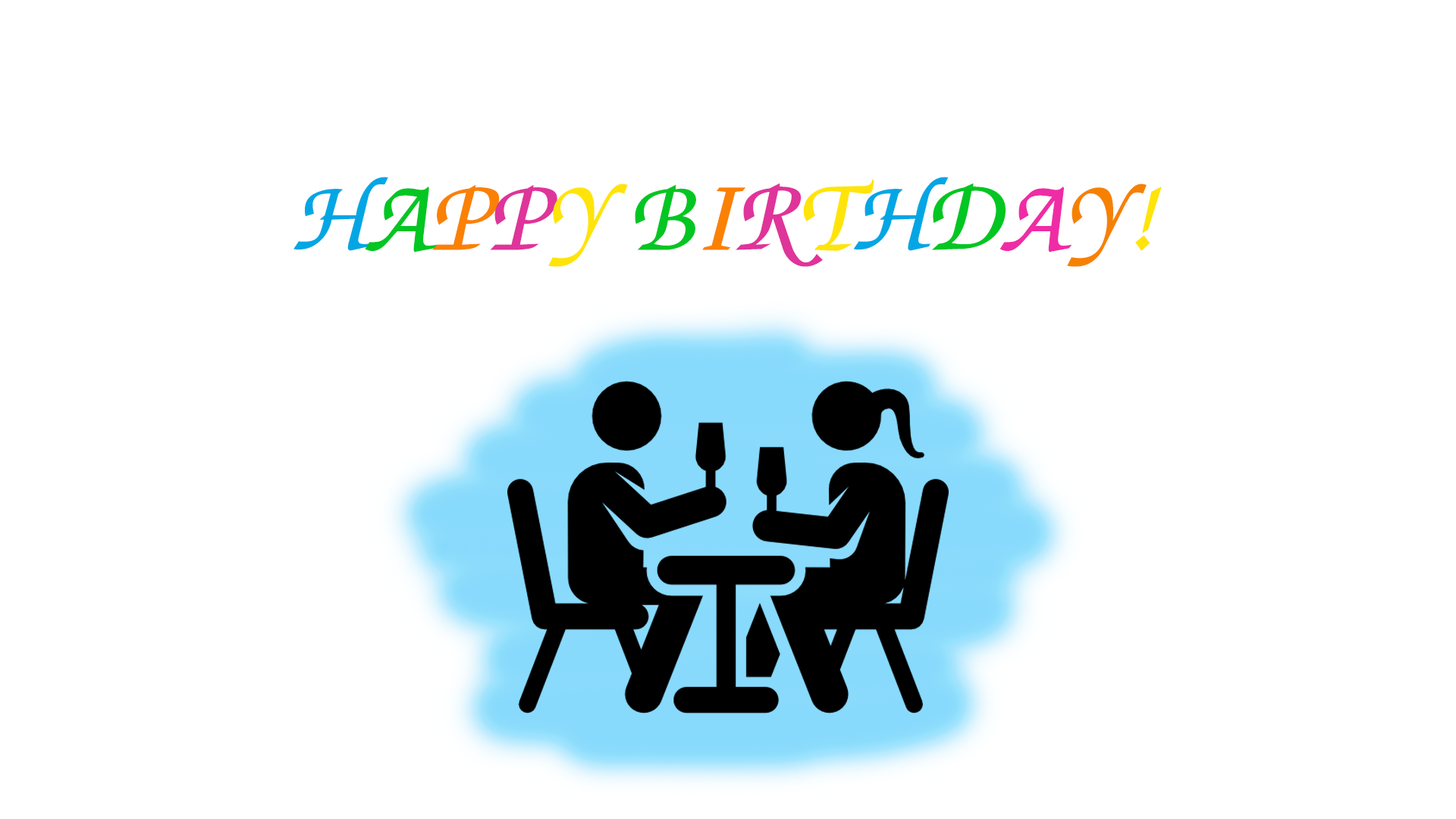
<style>
.page{position:relative;width:1456px;height:819px;background:#ffffff}
.page>*{position:absolute;margin:0}
.t1{font:107.6px "ThaHuongH11";color:#03a6e4}
.t2{font:107.6px "ThaHuongH11";color:#02c622}
.t3{font:107.6px "ThaHuongH11";color:#fa8103}
.t4{font:107.6px "ThaHuongH11";color:#df349a}
.t5{font:107.6px "ThaHuongH11";color:#ffe40a}
.t6{font:107.6px "ThaHuongH11";color:#ef2ca5}
.t7{font:107.6px "ThaHuongH11";color:#f68100}
</style>
<div class="page">
<p class="t1" style="left:293px;top:177px;width:869px;height:90px">H<span class="t2">A</span><span class="t3">P</span><span class="t4">P</span><span class="t5">Y </span><span class="t2">B</span><span class="t3">I</span><span class="t4">R</span><span class="t5">T</span>H<span class="t2">D</span><span class="t6">A</span><span class="t7">Y</span><span class="t5">!</span></p>
</div>
